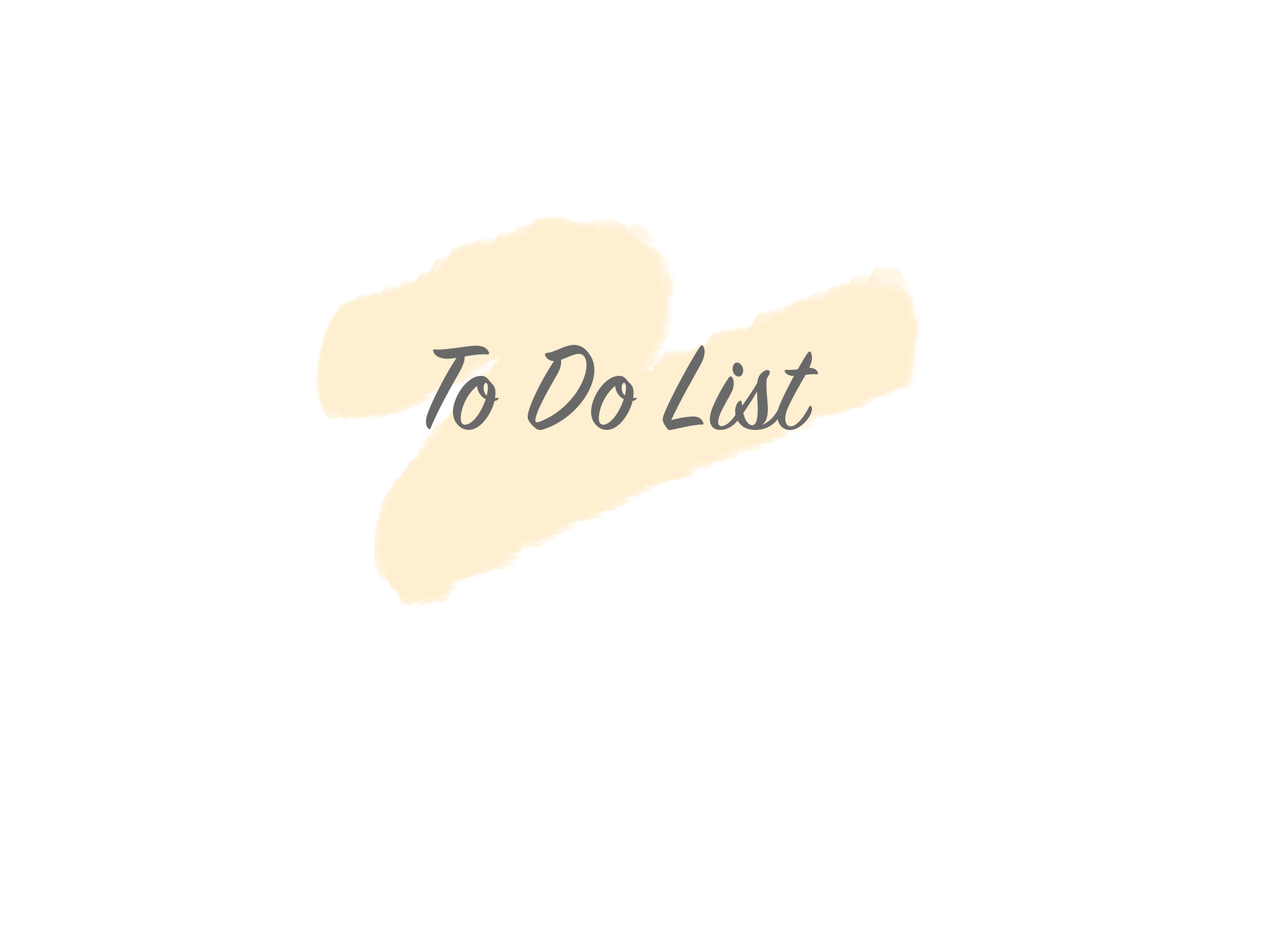
<style>
.page{position:relative;width:1261px;height:946px;background:#ffffff}
.page>*{position:absolute;margin:0}
.t1{font:133.5px "SignPainter-HouseScript";color:#696969}
</style>
<div class="page">
<p class="t1" style="left:426px;top:344px;width:393px;height:86px">To Do List</p>
</div>
